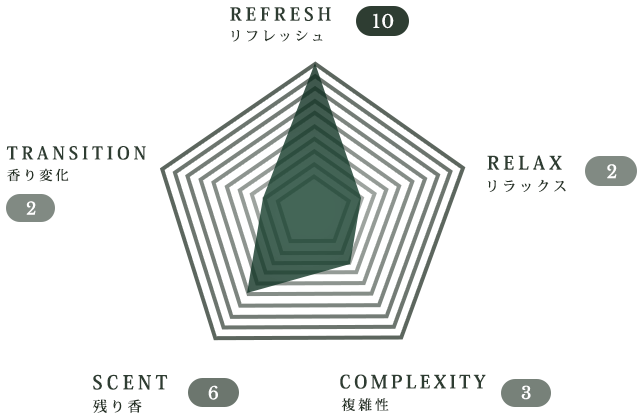
<style>
.page{position:relative;width:640px;height:420px;background:#ffffff}
.page>*{position:absolute;margin:0}
.t1{font:17.9px "KozMinPr6N-Bold";letter-spacing:0.22em;color:#27452e}
.t2{font:17.9px "LibreBaskerville-Regular";letter-spacing:0.06em;color:#ffffff}
.t3{font:13.4px "KozMinPr6N-Medium";letter-spacing:0.22em;color:#253125}
.t4{font:17.5px "KozMinPr6N-Bold";letter-spacing:0.22em;color:#27452e}
.t5{font:18.4px "KozMinPr6N-Bold";letter-spacing:0.22em;color:#27452e}
.t6{font:13.1px "KozMinPr6N-Medium";letter-spacing:0.22em;color:#20381f}
.t7{font:17.7px "LibreBaskerville-Regular";letter-spacing:0.06em;color:#ffffff}
.t8{font:13.8px "KozMinPr6N-Medium";letter-spacing:0.22em;color:#20381f}
.t9{font:16.8px "LibreBaskerville-Regular";letter-spacing:0.06em;color:#ffffff}
.t10{font:18.9px "KozMinPr6N-Bold";letter-spacing:0.22em;color:#27452e}
.t11{font:18.2px "KozMinPr6N-Bold";letter-spacing:0.18em;color:#27452e}
.t12{font:17.4px "LibreBaskerville-Regular";letter-spacing:0.06em;color:#ffffff}
.t13{font:17.1px "LibreBaskerville-Regular";letter-spacing:0.06em;color:#ffffff}
.t14{font:14.2px "KozMinPr6N-Medium";letter-spacing:0.22em;color:#20381f}
.t15{font:13.7px "KozMinPr6N-Medium";letter-spacing:0.22em;color:#253125}
</style>
<div class="page">
<p class="t1" style="left:230px;top:7px;width:101px;height:14px">REFRESH</p>
<p class="t2" style="left:373px;top:13px;width:21px;height:16px">10</p>
<p class="t3" style="left:231px;top:30px;width:92px;height:12px">リフレッシュ</p>
<p class="t4" style="left:6px;top:146px;width:140px;height:14px">TRANSITION</p>
<p class="t5" style="left:487px;top:155px;width:75px;height:15px">RELAX</p>
<p class="t6" style="left:7px;top:168px;width:62px;height:14px">香り変化</p>
<p class="t7" style="left:607px;top:164px;width:10px;height:15px">2</p>
<p class="t8" style="left:488px;top:179px;width:78px;height:13px">リラックス</p>
<p class="t9" style="left:26px;top:201px;width:10px;height:14px">2</p>
<p class="t10" style="left:93px;top:374px;width:75px;height:16px">SCENT</p>
<p class="t11" style="left:340px;top:374px;width:146px;height:15px">COMPLEXITY</p>
<p class="t12" style="left:208px;top:385px;width:10px;height:15px">6</p>
<p class="t13" style="left:521px;top:385px;width:10px;height:15px">3</p>
<p class="t14" style="left:93px;top:399px;width:49px;height:14px">残り香</p>
<p class="t15" style="left:341px;top:398px;width:48px;height:14px">複雑性</p>
</div>
